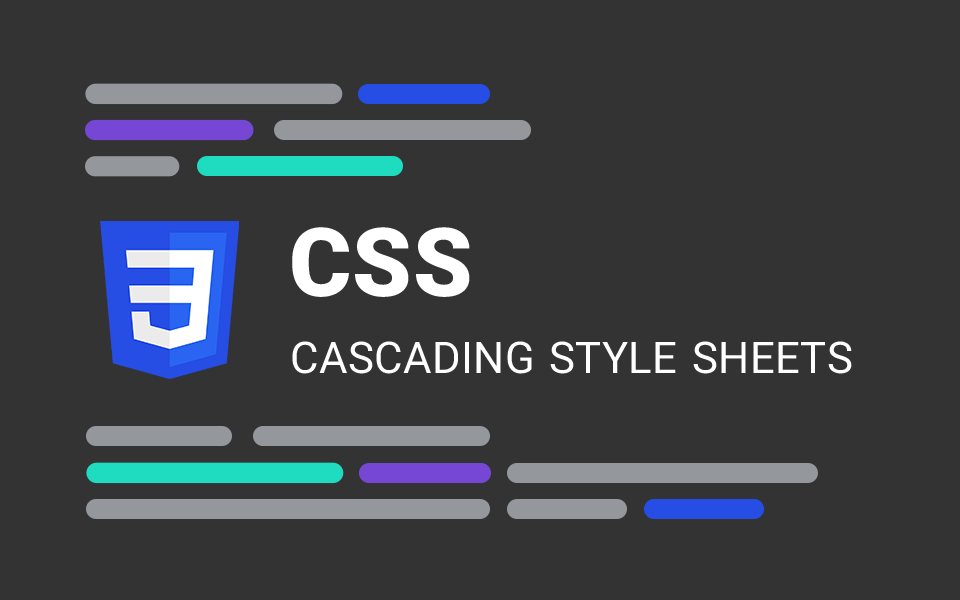
<style>
.page{position:relative;width:960px;height:600px;background:#333333}
.page>*{position:absolute;margin:0}
.t1{font:95.2px "IRANYekan-ExtraBold";letter-spacing:0.009em;color:#ffffff}
.t2{font:43.8px "IRANYekan";letter-spacing:0.009em;color:#ffffff}
</style>
<div class="page">
<p class="t1" style="left:292px;top:227px;width:178px;height:70px">CSS</p>
<p class="t2" style="left:292px;top:341px;width:560px;height:33px">CASCADING STYLE SHEETS</p>
</div>
